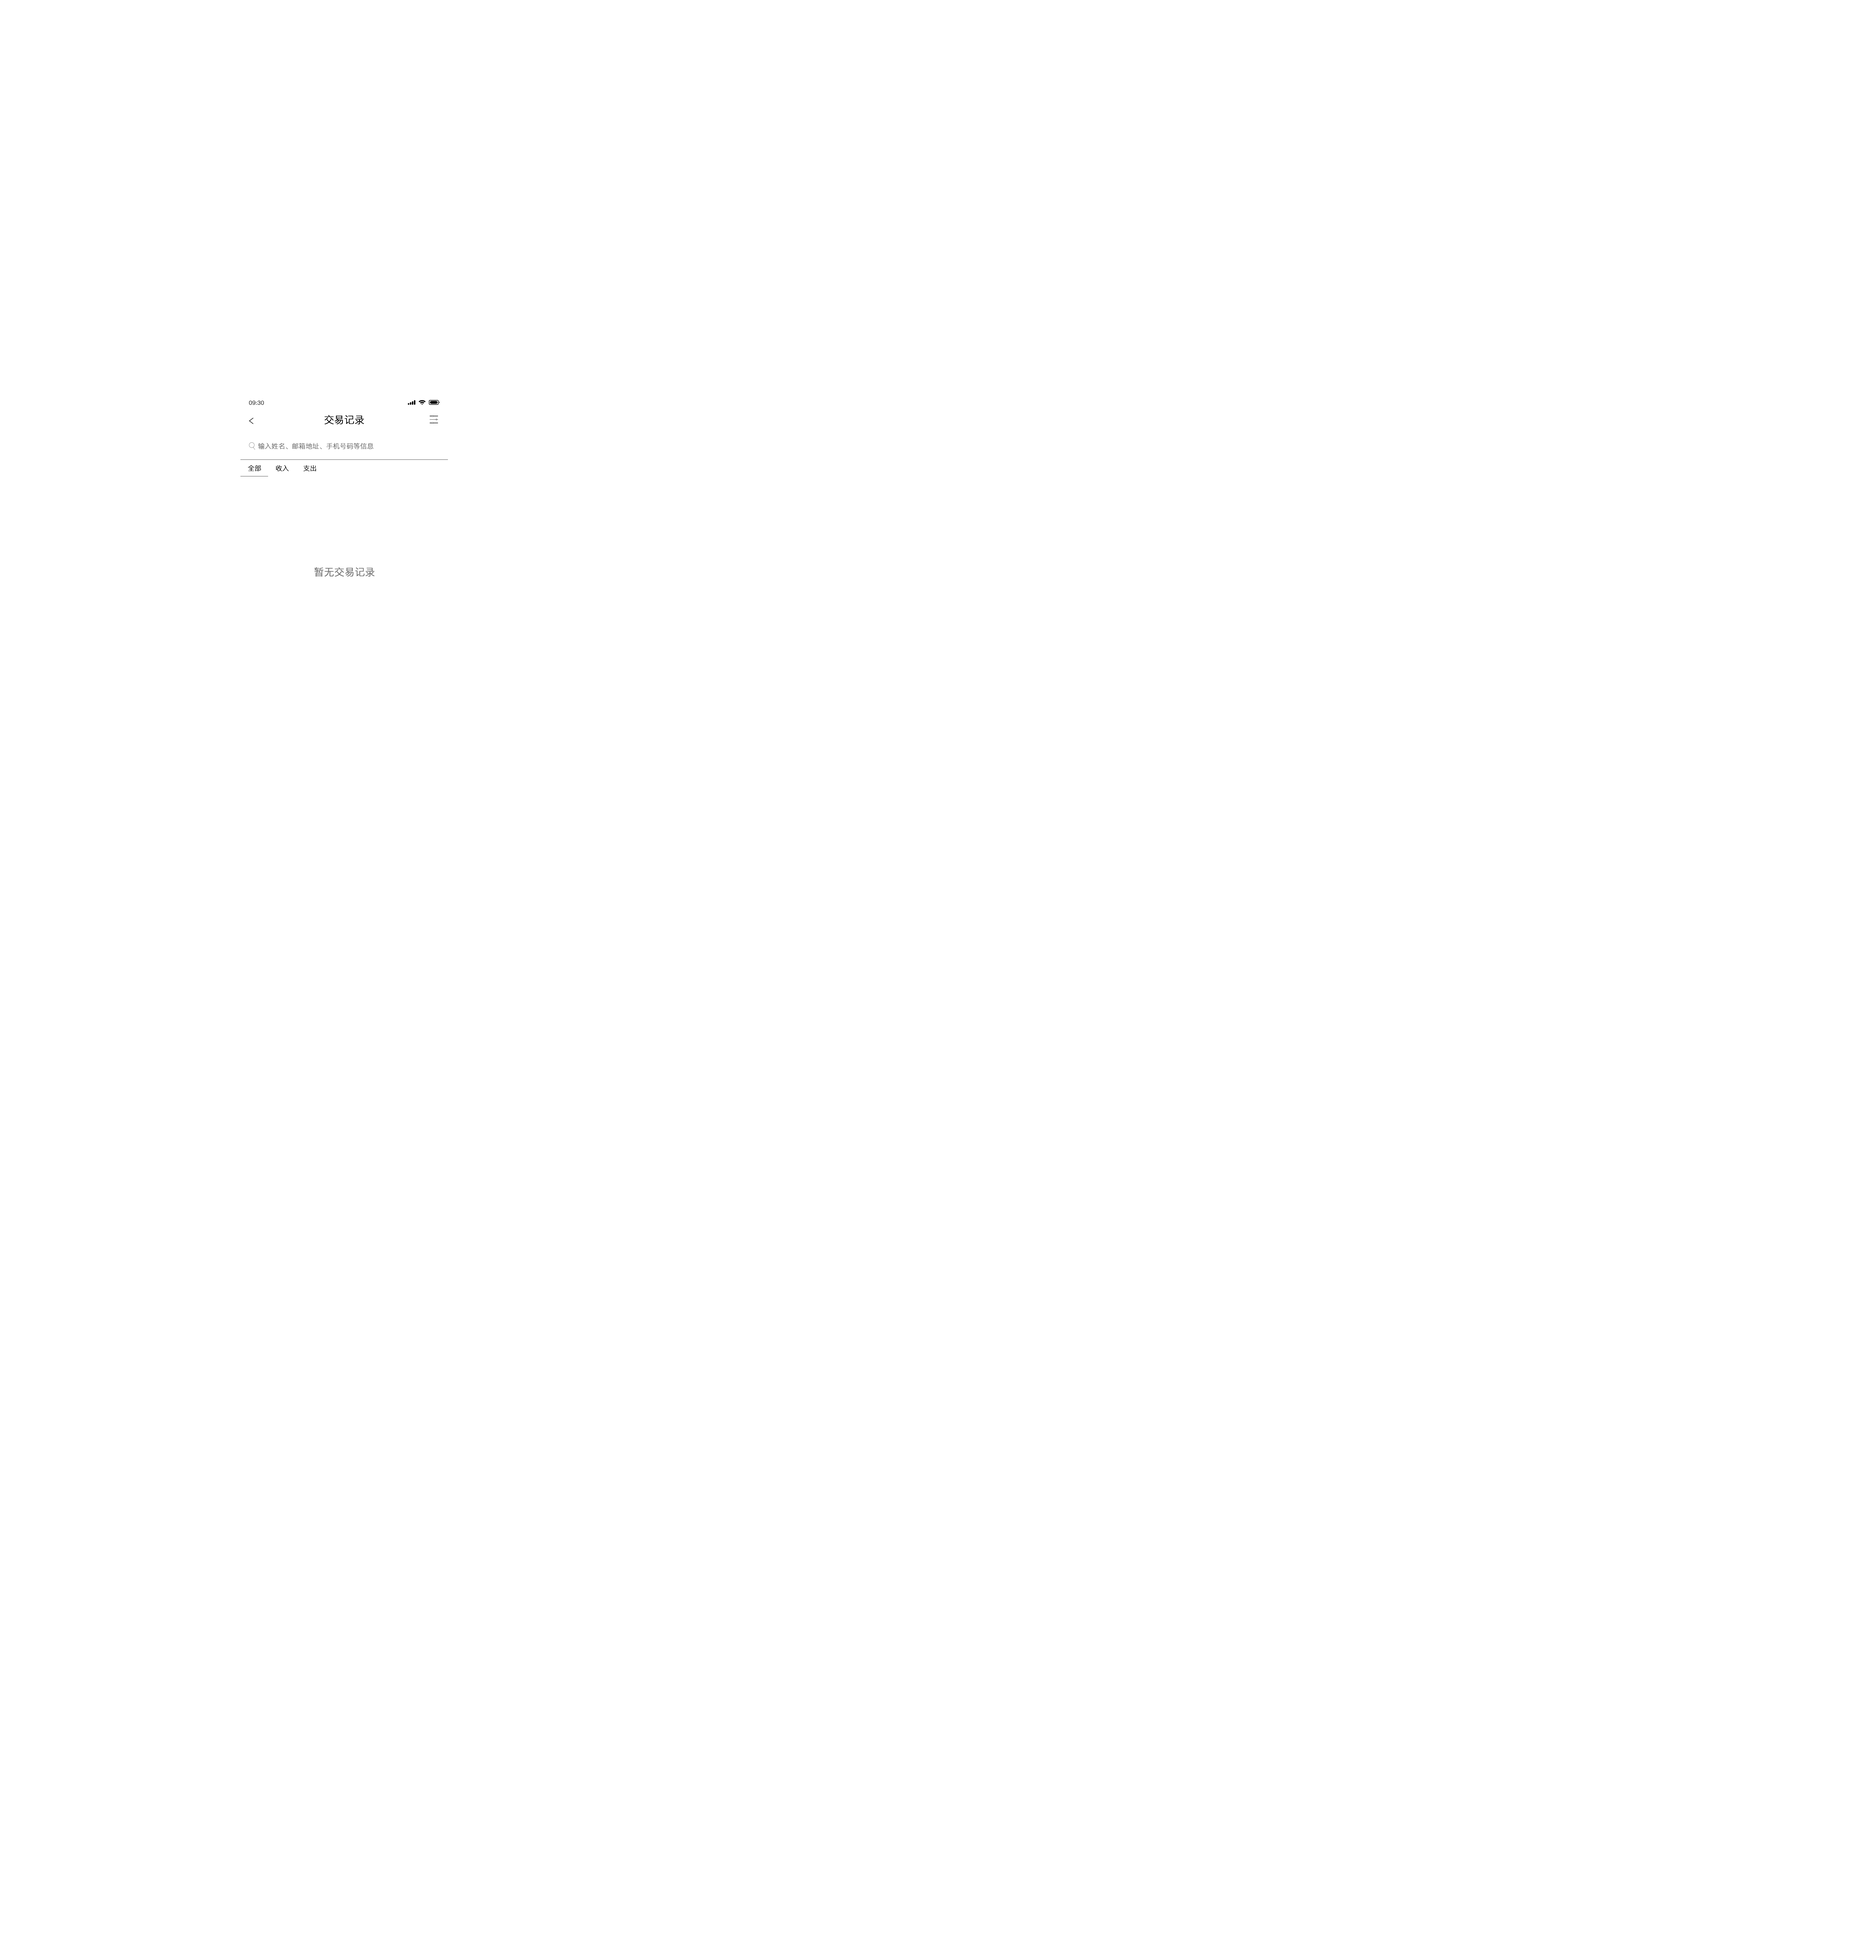
<style>
.page{position:relative;width:1859px;height:1957px;background:#ffffff}
.page>*{position:absolute;margin:0}
.t1{font:5.5px "PingFang-SC-Regular";color:#000000;font-weight:bold}
.t2{font:10px "PingFang-SC-Regular";color:#000000;font-weight:bold}
.t3{font:6.6px "PingFang-SC-Regular";color:#6e6e6e;font-weight:bold}
.t4{font:6.6px "PingFang-SC-Regular";color:#000000;font-weight:bold}
.t5{font:10px "PingFang-SC-Regular";color:#6f6f6f;font-weight:bold}
</style>
<div class="page">
<p class="t1" style="left:249px;top:400px;width:15px;height:5px">09:30</p>
<p class="t2" style="left:325px;top:415px;width:39px;height:9px">交易记录</p>
<p class="t3" style="left:258px;top:443px;width:116px;height:6px">输入姓名、邮箱地址、手机号码等信息</p>
<p class="t4" style="left:248px;top:465px;width:13px;height:6px">全部</p>
<p class="t4" style="left:276px;top:465px;width:13px;height:6px">收入</p>
<p class="t4" style="left:303px;top:465px;width:13px;height:6px">支出</p>
<p class="t5" style="left:314px;top:567px;width:61px;height:9px">暂无交易记录</p>
</div>
